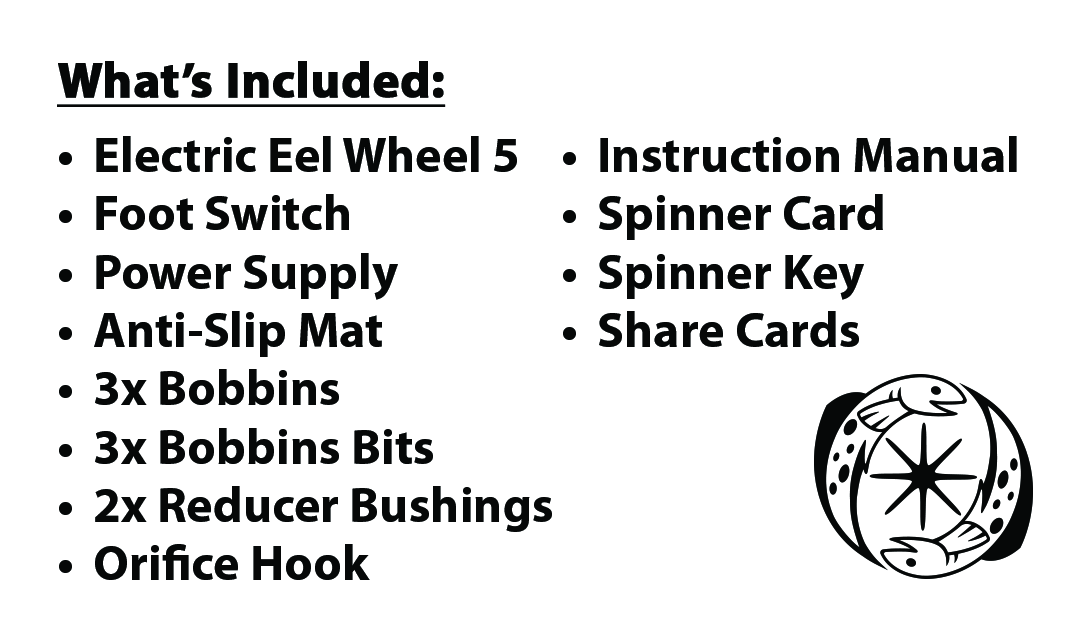
<style>
.page{position:relative;width:1085px;height:635px;background:#ffffff}
.page>*{position:absolute;margin:0}
.t1{font:50px/58.3px "MyriadPro-Bold";color:#060808}
.t2{font:50px/75px "MyriadPro-Bold";color:#060808;font-weight:bold;text-decoration:underline}
.t3{font:50px/75px "MyriadPro-Bold";color:#060808}
</style>
<div class="page">
<p class="t1" style="left:57px;top:61px;width:960px;height:519px"><span class="t2">What’s Included:<br></span><span class="t3">•</span> Electric Eel Wheel 5  • Instruction Manual<br>• Foot Switch      • Spinner Card<br>• Power Supply     • Spinner Key<br>• Anti-Slip Mat     • Share Cards<br>• 3x Bobbins<br>• 3x Bobbins Bits<br>• 2x Reducer Bushings<br>• Orifice Hook</p>
</div>
